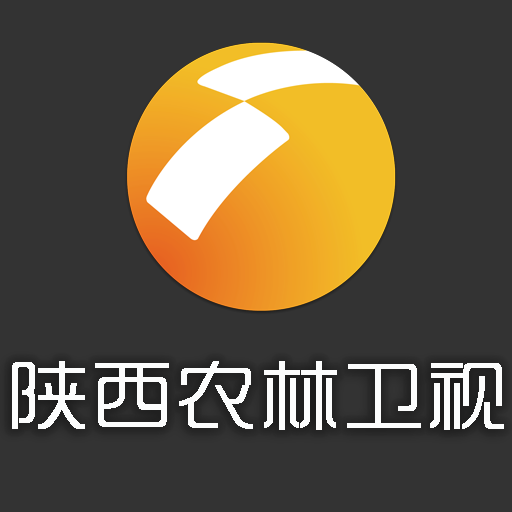
<style>
.page{position:relative;width:512px;height:512px;background:#333333}
.page>*{position:absolute;margin:0}
.t1{font:80px "SJshishang-Regular";letter-spacing:0.02em;color:#fcfdfd;font-weight:bold}
</style>
<div class="page">
<p class="t1" style="left:12px;top:361px;width:492px;height:69px">陕西农林卫视</p>
</div>
